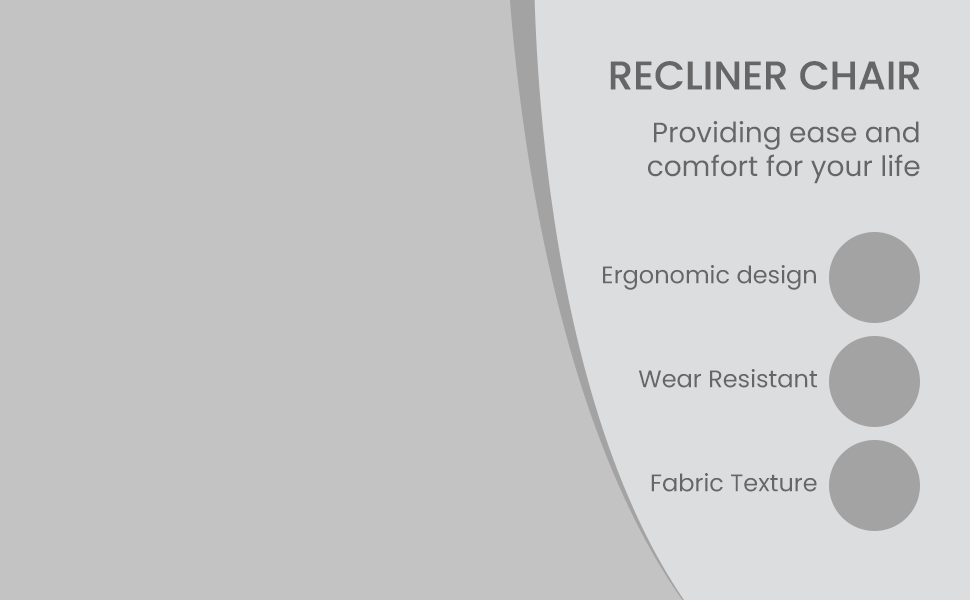
<style>
.page{position:relative;width:970px;height:600px;background:#c3c3c3}
.page>*{position:absolute;margin:0}
.t1{font:40px "Poppins-Medium";color:#666666;text-transform:uppercase}
.t2{font:28px "Poppins-Regular";color:#666666}
.t3{font:24px "Poppins-Regular";color:#666666}
</style>
<div class="page">
<p class="t1" style="left:610px;top:61px;width:310px;height:29px">RECLINER CHAIR</p>
<p class="t2" style="left:648px;top:121px;width:272px;height:63px;text-align:right">Providing ease and<br>comfort for your life</p>
<p class="t3" style="left:603px;top:265px;width:213px;height:25px">Ergonomic design</p>
<p class="t3" style="left:638px;top:369px;width:179px;height:19px">Wear Resistant</p>
<p class="t3" style="left:651px;top:473px;width:166px;height:19px">Fabric Texture</p>
</div>
